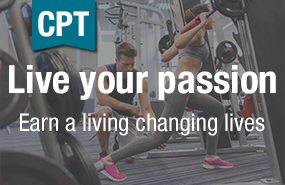
<style>
.page{position:relative;width:285px;height:185px}
.page>*{position:absolute;margin:0}
.t1{font:34.4px "HelveticaNeueLTPro-BdCn";color:#ffffff}
.t2{font:39px "HelveticaNeueLTPro-BdCn";color:#ffffff}
.t3{font:24.5px "HelveticaNeueLTPro-Cn";color:#ffffff}
</style>
<div class="page">
<p class="t1" style="left:38px;top:11px;width:51px;height:26px">CPT</p>
<p class="t2" style="left:9px;top:65px;width:267px;height:35px">Live your passion</p>
<p class="t3" style="left:20px;top:113px;width:245px;height:23px">Earn a living changing lives</p>
</div>
